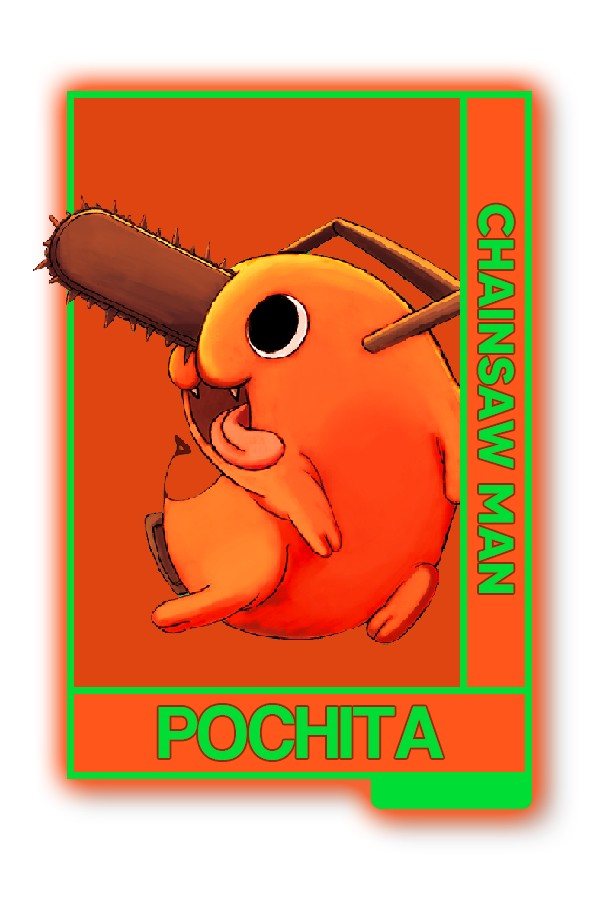
<style>
.page{position:relative;width:600px;height:900px;background:#ffffff}
.page>*{position:absolute;margin:0}
.t1{font:48.8px "MADETOMMY-Bold";color:#00dd35}
.t2{font:75.7px "CoolveticaRg-Regular";color:#00dd35}
</style>
<div class="page">
<p class="t1" style="left:478px;top:204px;width:36px;height:389px;rotate:90deg">CHAINSAW MAN</p>
<p class="t2" style="left:158px;top:705px;width:286px;height:55px">POCHITA</p>
</div>
